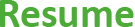
<style>
.page{position:relative;width:135px;height:27px;background:#ffffff}
.page>*{position:absolute;margin:0}
.t1{font:41.7px "Calibri-Bold";color:#4dab38}
</style>
<div class="page">
<p class="t1" style="left:0px;top:0px;width:134px;height:27px">Resume</p>
</div>
